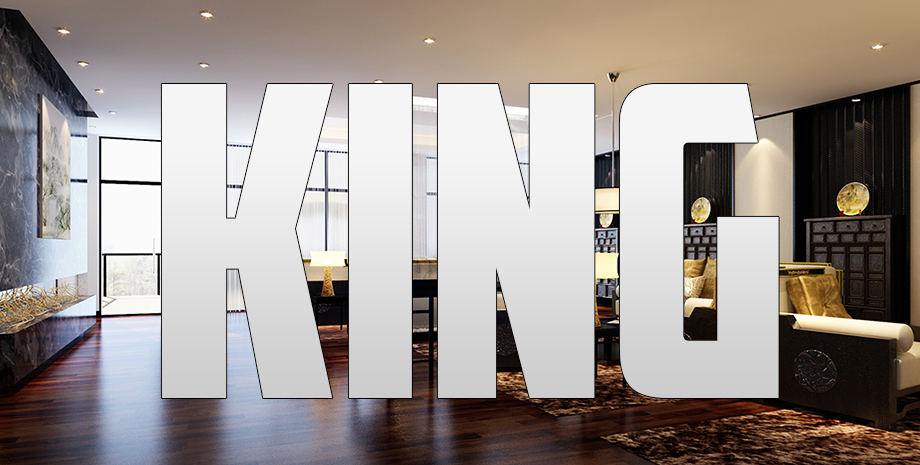
<style>
.page{position:relative;width:920px;height:465px}
.page>*{position:absolute;margin:0}
.t1{font:432.6px "AmericanCaptain";color:#e6e6e6}
</style>
<div class="page">
<p class="t1" style="left:161px;top:84px;width:618px;height:314px">KING</p>
</div>
